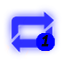
<style>
.page{position:relative;width:62px;height:62px;background:#ffffff}
.page>*{position:absolute;margin:0}
.t1{font:15.1px "PTSans-Bold";letter-spacing:-0.025em;color:#080808;font-weight:bold;font-style:italic}
</style>
<div class="page">
<p class="t1" style="left:41px;top:35px;width:8px;height:12px">1</p>
</div>
